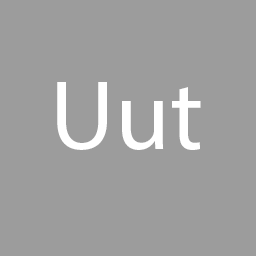
<style>
.page{position:relative;width:256px;height:256px;background:#9c9c9c}
.page>*{position:absolute;margin:0}
.t1{font:100px "MyriadPro-Regular";color:#ffffff}
</style>
<div class="page">
<p class="t1" style="left:57px;top:82px;width:144px;height:68px">Uut</p>
</div>
